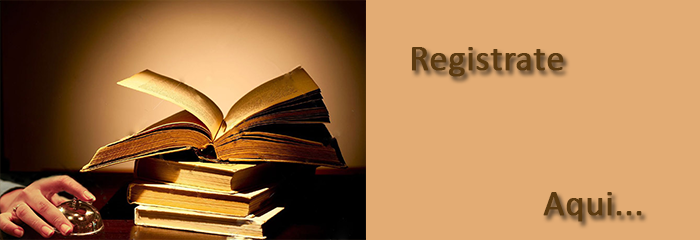
<style>
.page{position:relative;width:700px;height:240px;background:#e3ac74}
.page>*{position:absolute;margin:0}
.t1{font:36px "Calibri";color:#4d2d02;font-weight:bold}
</style>
<div class="page">
<p class="t1" style="left:412px;top:47px;width:152px;height:30px;opacity:0.93">Registrate</p>
<p class="t1" style="left:543px;top:192px;width:99px;height:30px;opacity:0.93">Aqui...</p>
</div>
